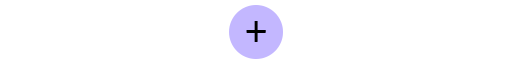
<style>
.page{position:relative;width:512px;height:63px;background:#ffffff}
.page>*{position:absolute;margin:0}
.t1{font:43.5px "FormaDJRMicro-Regular";color:#000000}
</style>
<div class="page">
<p class="t1" style="left:246px;top:21px;width:20px;height:21px">+</p>
</div>
